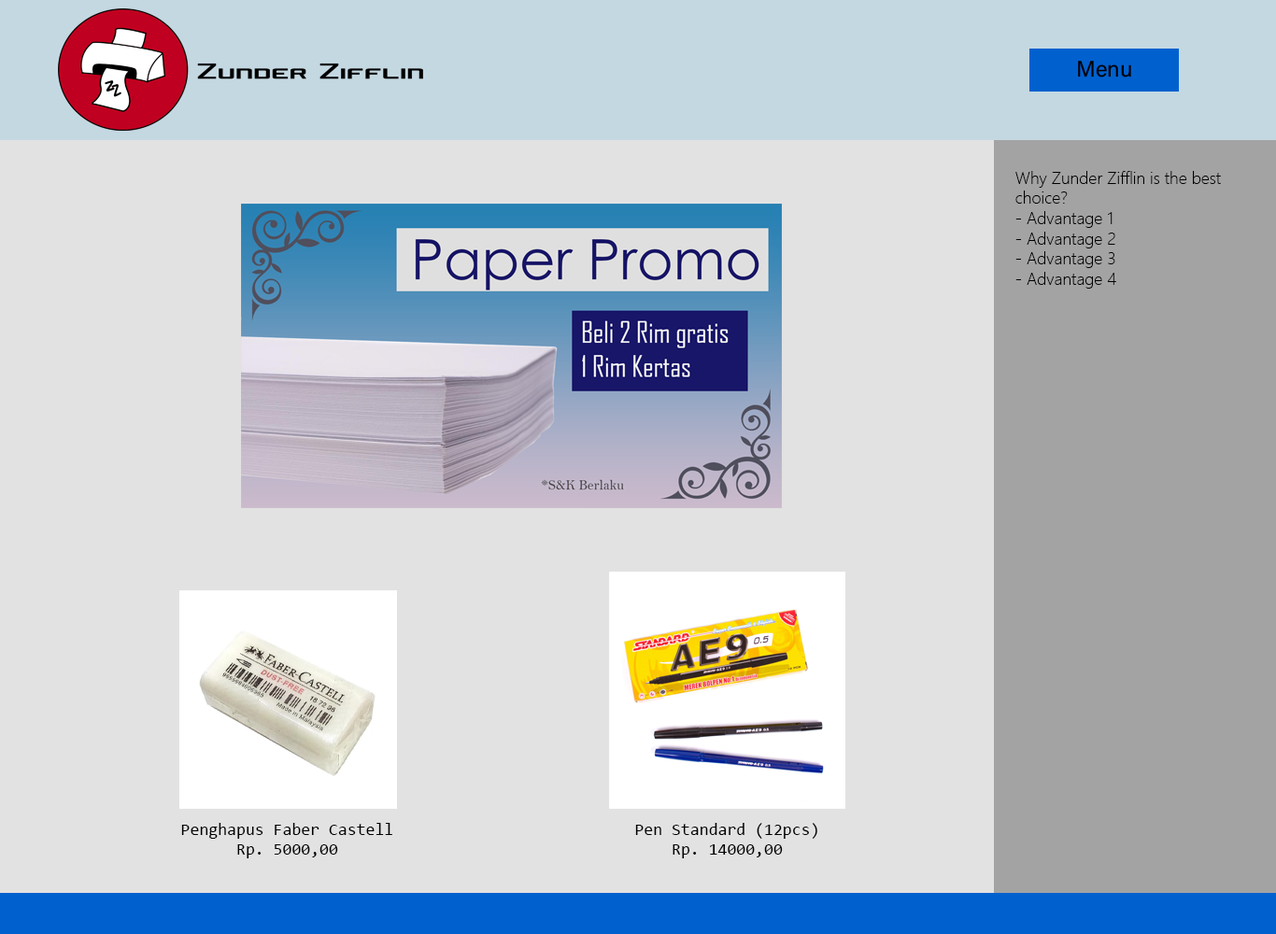
<style>
.page{position:relative;width:1276px;height:934px;background:#e2e2e2}
.page>*{position:absolute;margin:0}
.t1{font:22.4px "AcuminConcept-Regular";color:#000000}
.t2{font:16.8px "SegoeUI-Light";color:#000000}
.t3{font:16.8px "Consolas";color:#000000}
</style>
<div class="page">
<p class="t1" style="left:1078px;top:61px;width:53px;height:17px">Menu</p>
<p class="t2" style="left:1016px;top:171px;width:205px;height:118px">Why Zunder Zifflin is the best<br>choice?<br>- Advantage 1<br>- Advantage 2<br>- Advantage 3<br>- Advantage 4</p>
<p class="t3" style="left:181px;top:823px;width:211px;height:36px;text-align:center">Penghapus Faber Castell<br>Rp. 5000,00</p>
<p class="t3" style="left:635px;top:823px;width:183px;height:36px;text-align:center">Pen Standard (12pcs)<br>Rp. 14000,00</p>
</div>
